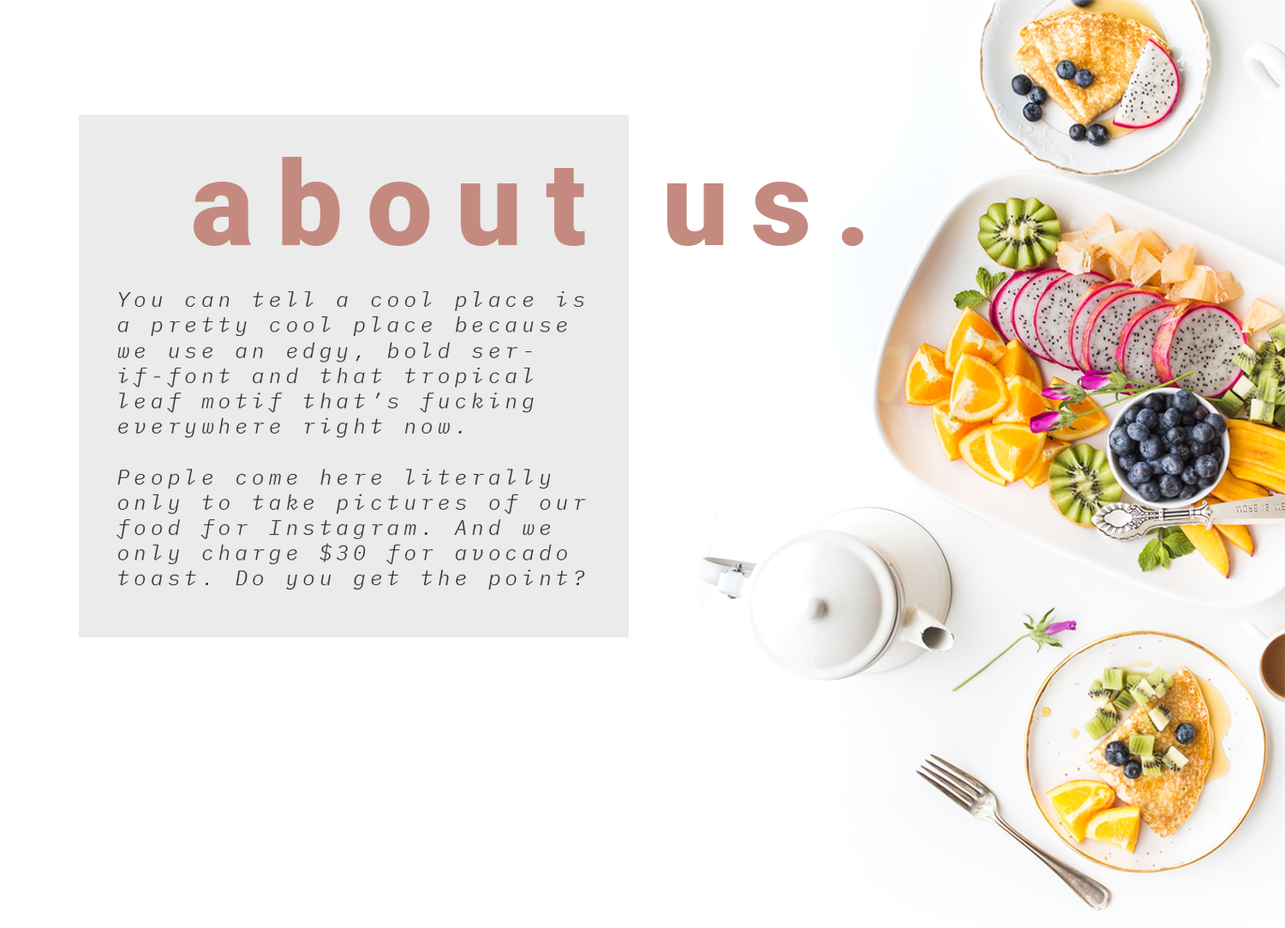
<style>
.page{position:relative;width:1285px;height:928px;background:#ffffff}
.page>*{position:absolute;margin:0}
.t1{font:117.4px "Roboto-Black";letter-spacing:0.2em;color:#c48a80}
.t2{font:21.1px "IBMPlexMono-LightItalic";letter-spacing:0.2em;color:#2b2b2b}
</style>
<div class="page">
<p class="t1" style="left:194px;top:157px;width:670px;height:89px">about us.</p>
<p class="t2" style="left:117px;top:291px;width:469px;height:298px">You can tell a cool place is a pretty cool place because we use an edgy, bold serif-font and that tropical leaf motif that’s fucking everywhere right now. <br><br>People come here literally only to take pictures of our food for Instagram. And we only charge $30 for avocado toast. Do you get the point?</p>
</div>
